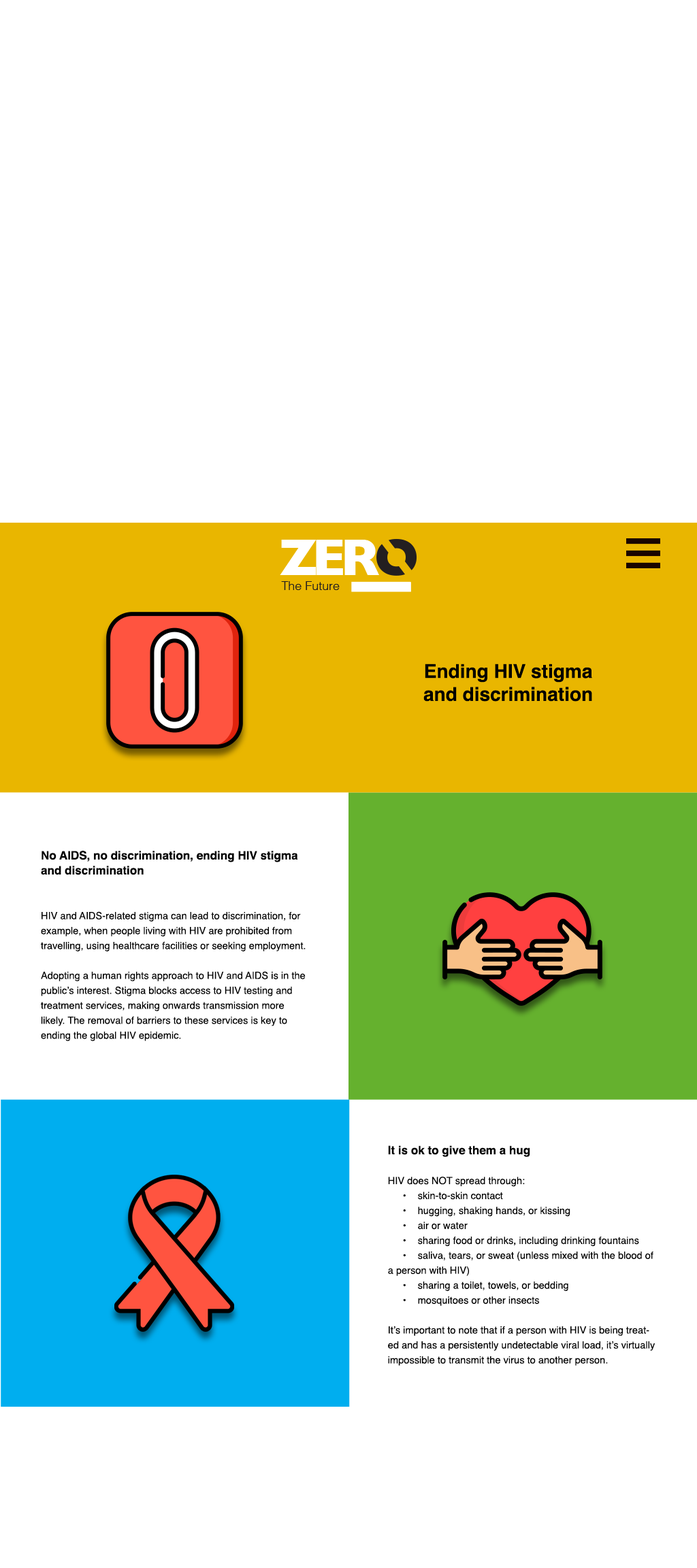
<style>
.page{position:relative;width:697px;height:1568px;background:#ffffff}
.page>*{position:absolute;margin:0}
.t1{font:19.1px "Helvetica-Bold";color:#000000}
.t2{font:10px/14.9px "Helvetica";color:#000000}
.t3{font:11.6px/14.9px "Helvetica-Bold";color:#000000}
</style>
<div class="page">
<p class="t1" style="left:423px;top:664px;width:169px;height:38px;text-align:center">Ending HIV stigma <br>and discrimination</p>
<p class="t2" style="left:41px;top:851px;width:265px;height:190px;text-align:right"><span class="t3">No AIDS, no discrimination, ending HIV stigma and discrimination<br></span><br><br>HIV and AIDS-related stigma can lead to discrimination, for example, when people living with HIV are prohibited from travelling, using healthcare facilities or seeking employment.<br><br>Adopting a human rights approach to HIV and AIDS is in the public’s interest. Stigma blocks access to HIV testing and treatment services, making onwards transmission more likely. The removal of barriers to these services is key to ending the global HIV epidemic.</p>
<p class="t2" style="left:388px;top:1145px;width:267px;height:221px;text-align:right"><span class="t3">It is ok to give them a hug<br></span><br>HIV does NOT spread through:<br> • skin-to-skin contact<br> • hugging, shaking hands, or kissing<br> • air or water<br> • sharing food or drinks, including drinking fountains<br> • saliva, tears, or sweat (unless mixed with the blood of a person with HIV)<br> • sharing a toilet, towels, or bedding<br> • mosquitoes or other insects<br><br>It’s important to note that if a person with HIV is being treated and has a persistently undetectable viral load, it’s virtually impossible to transmit the virus to another person.</p>
</div>
